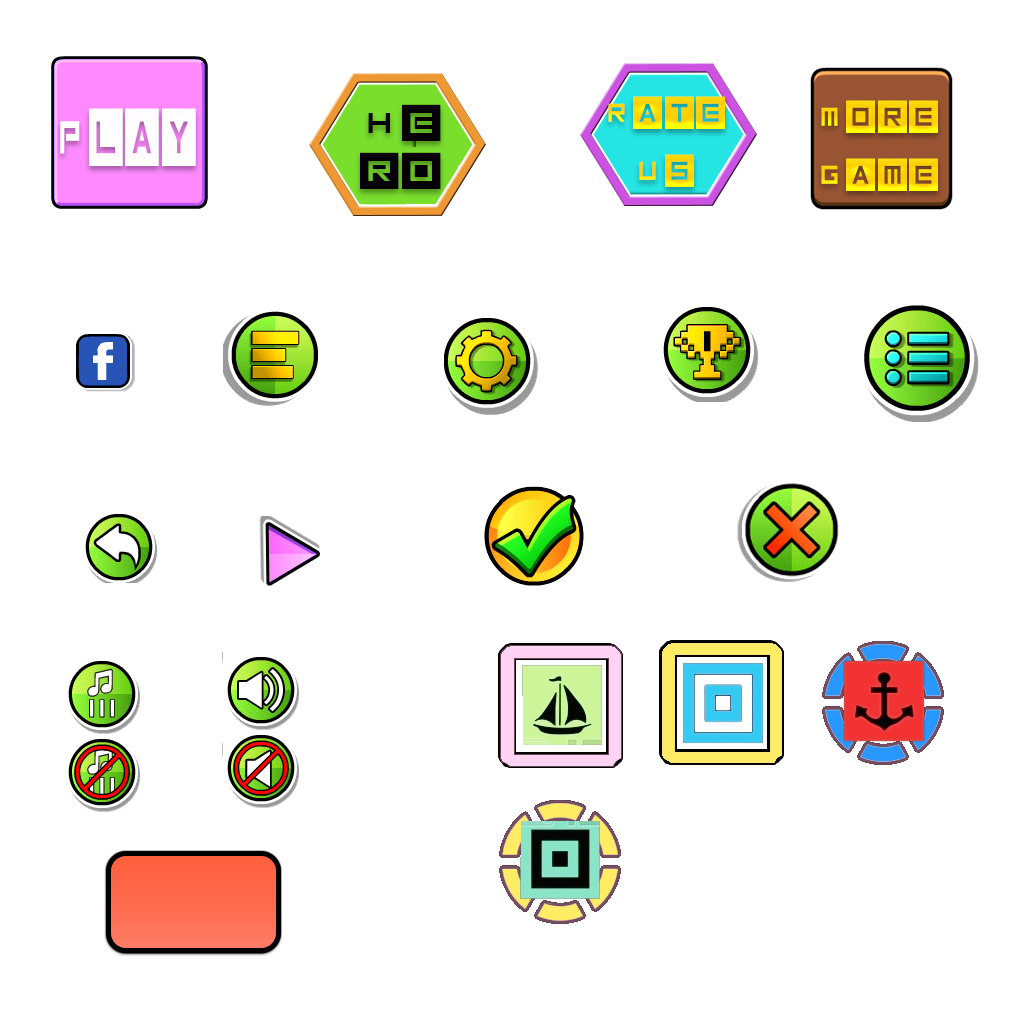
<style>
.page{position:relative;width:1024px;height:1024px;background:#ffffff}
.page>*{position:absolute;margin:0}
.t1{font:58px/58.1px "Inversionz";letter-spacing:-0.02em;color:#ffd705;scale:0.89 1}
.t2{font:58px/58.1px "Inversionz";letter-spacing:-0.02em;color:#ffd605;scale:0.89 1}
.t3{font:101.9px "Inversionz";letter-spacing:-0.02em;color:#ffffff;scale:0.59 1}
.t4{font:64.3px/47.8px "Inversionz";letter-spacing:-0.02em;color:#060206;scale:1.07 1}
</style>
<div class="page">
<p class="t1" style="left:608px;top:96px;width:117px;height:91px">Rate<br> Us</p>
<p class="t2" style="left:821px;top:100px;width:117px;height:91px">More<br>Game</p>
<p class="t3" style="left:60px;top:108px;width:136px;height:58px">Play</p>
<p class="t4" style="left:360px;top:104px;width:81px;height:85px">He<br>ro</p>
</div>
